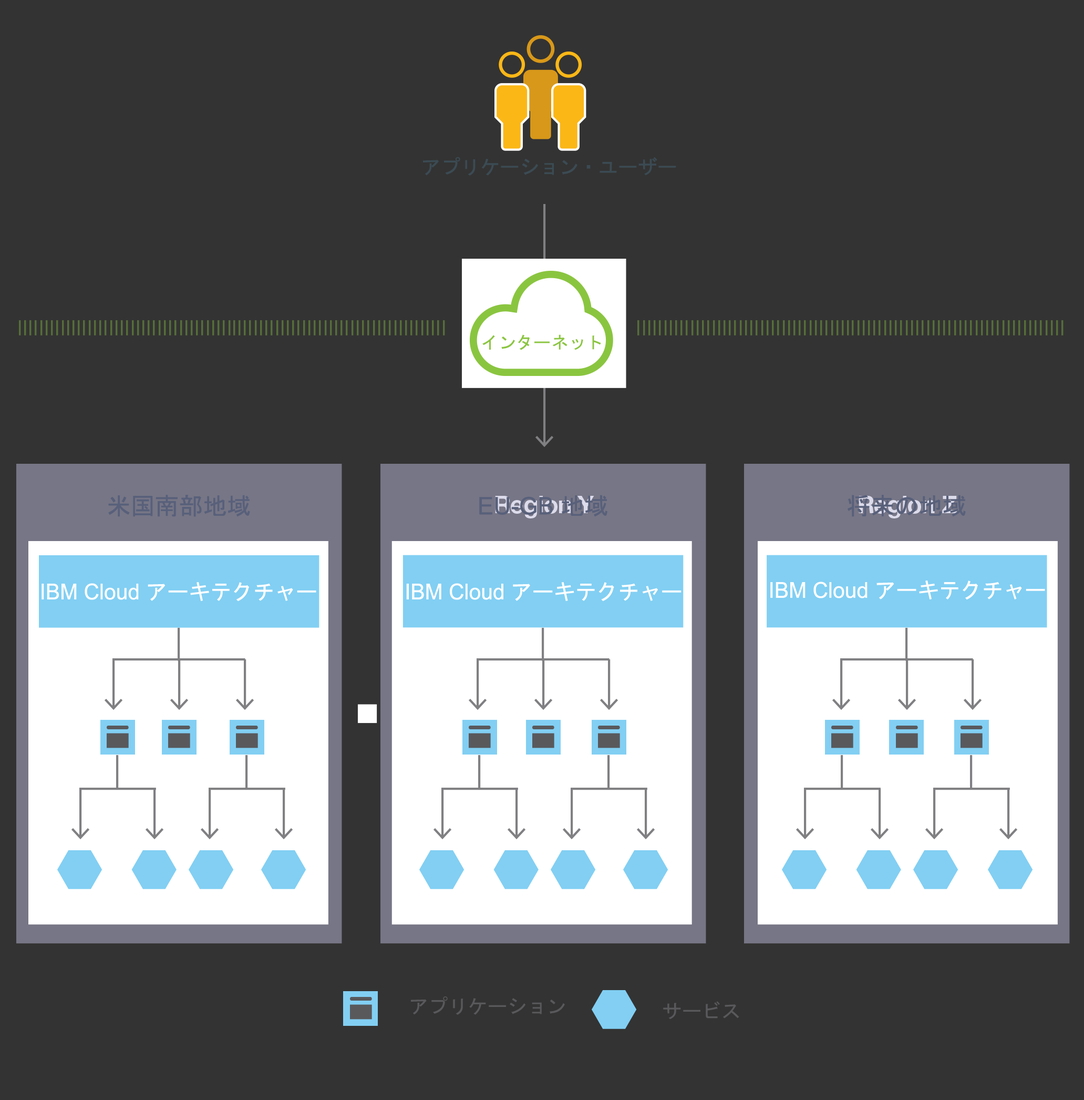
<style>
.page{position:relative;width:1084px;height:1100px;background:#333333}
.page>*{position:absolute;margin:0}
.t1{font:19.7px "MS-Gothic";color:#3b4b54}
.t2{font:17.5px "MS-Gothic";color:#8ac540}
.t3{font:24.1px "MS-Gothic";color:#58607a}
.t4{font:24.1px "ArialMT";color:#58607a}
.t5{font:24.1px "HelvNeueBoldforIBM"}
.t6{font:21.9px "ArialMT";color:#ffffff}
.t7{font:21.9px "MS-Gothic";color:#ffffff}
.t8{font:19.7px "MS-Gothic";color:#59595c}
</style>
<div class="page">
<p class="t1" style="left:423px;top:157px;width:253px;height:19px">アプリケーション・ユーザー</p>
<p class="t2" style="left:483px;top:334px;width:118px;height:16px">インターネット</p>
<p class="t3" style="left:108px;top:495px;width:142px;height:22px">米国南部地域</p>
<p class="t4" style="left:479px;top:495px;width:129px;height:22px">EU-GB <span class="t3">地域</span></p>
<p class="t5" style="left:495px;top:496px;width:99px;height:22px">Region Y</p>
<p class="t3" style="left:848px;top:495px;width:118px;height:22px">将来の地域</p>
<p class="t5" style="left:859px;top:496px;width:98px;height:22px">Region Z</p>
<p class="t6" style="left:42px;top:582px;width:274px;height:19px">IBM Cloud <span class="t7">アーキテクチャー</span></p>
<p class="t6" style="left:406px;top:582px;width:276px;height:19px">IBM Cloud <span class="t7">アーキテクチャー</span></p>
<p class="t6" style="left:771px;top:580px;width:274px;height:20px">IBM Cloud <span class="t7">アーキテクチャー</span></p>
<p class="t8" style="left:411px;top:996px;width:154px;height:18px">アプリケーション</p>
<p class="t8" style="left:663px;top:1001px;width:77px;height:18px">サービス</p>
</div>
